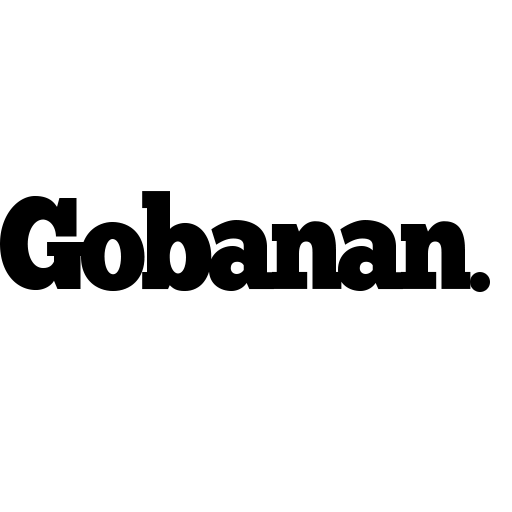
<style>
.page{position:relative;width:512px;height:512px;background:#ffffff}
.page>*{position:absolute;margin:0}
.t1{font:130.5px "ChunkFive-Regular";letter-spacing:-0.06em;color:#000000;scale:0.88 1}
</style>
<div class="page">
<p class="t1" style="left:0px;top:191px;width:471px;height:101px">Gobanan</p>
</div>
